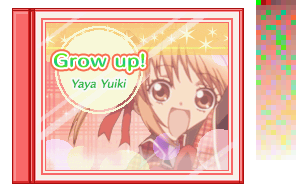
<style>
.page{position:relative;width:296px;height:192px}
.page>*{position:absolute;margin:0}
.t1{font:16px "HummingStd-B";letter-spacing:0.05em;scale:1.1 1}
.t2{font:10px "HummingStd-D";letter-spacing:0.02em;color:#30b848;font-style:italic}
</style>
<div class="page">
<p class="t1" style="left:54px;top:53px;width:91px;height:19px">Grow up!</p>
<p class="t2" style="left:72px;top:78px;width:55px;height:13px">Yaya Yuiki</p>
</div>
